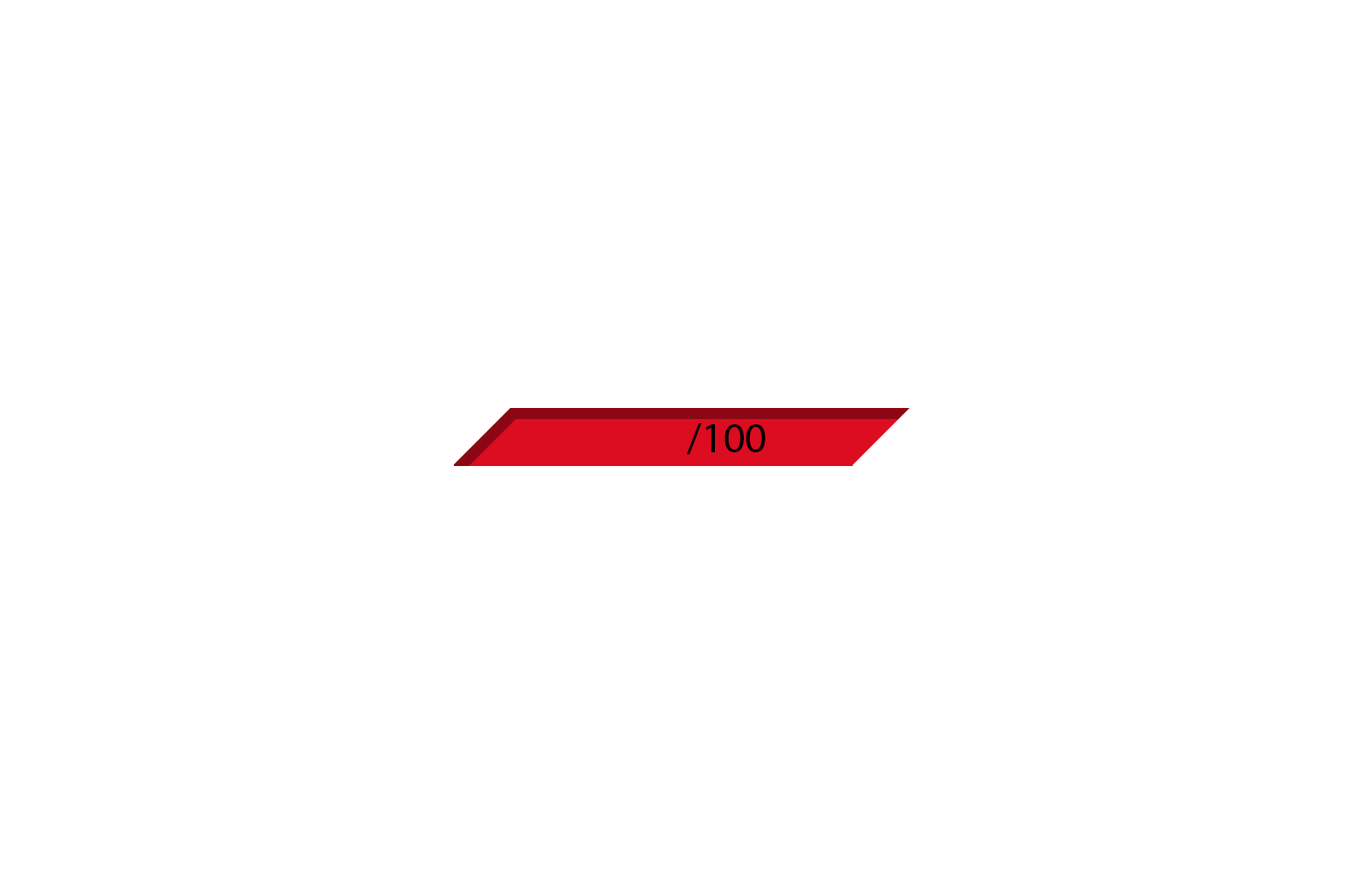
<style>
.page{position:relative;width:1365px;height:874px;background:#ffffff}
.page>*{position:absolute;margin:0}
.t1{font:42.7px "MyriadPro-Regular";color:#000000}
</style>
<div class="page">
<p class="t1" style="left:687px;top:423px;width:78px;height:32px">/100</p>
</div>
